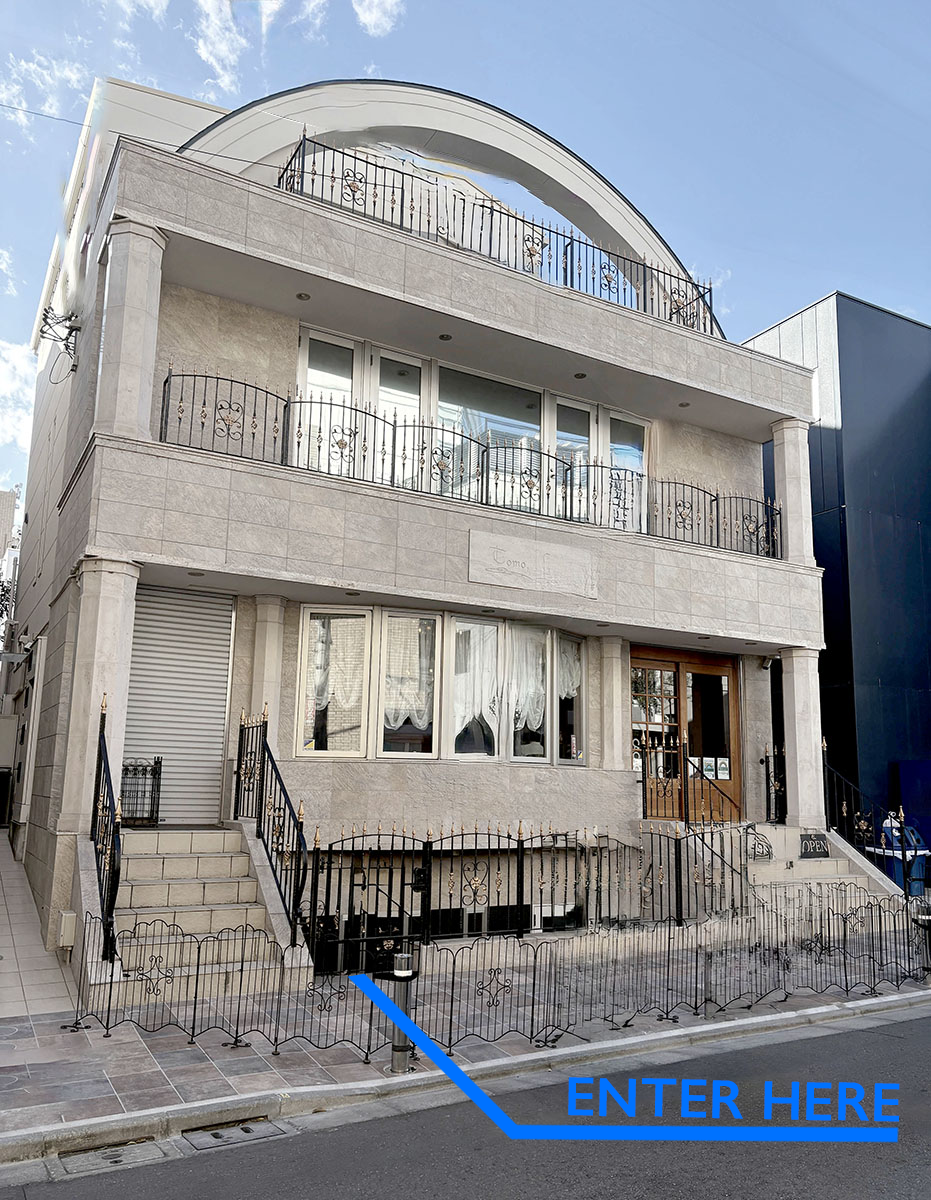
<style>
.page{position:relative;width:931px;height:1200px}
.page>*{position:absolute;margin:0}
.t1{font:55.6px "GillSans-SemiBold";color:#0072ff}
</style>
<div class="page">
<p class="t1" style="left:568px;top:1077px;width:332px;height:45px;rotate:1deg">ENTER HERE</p>
</div>
